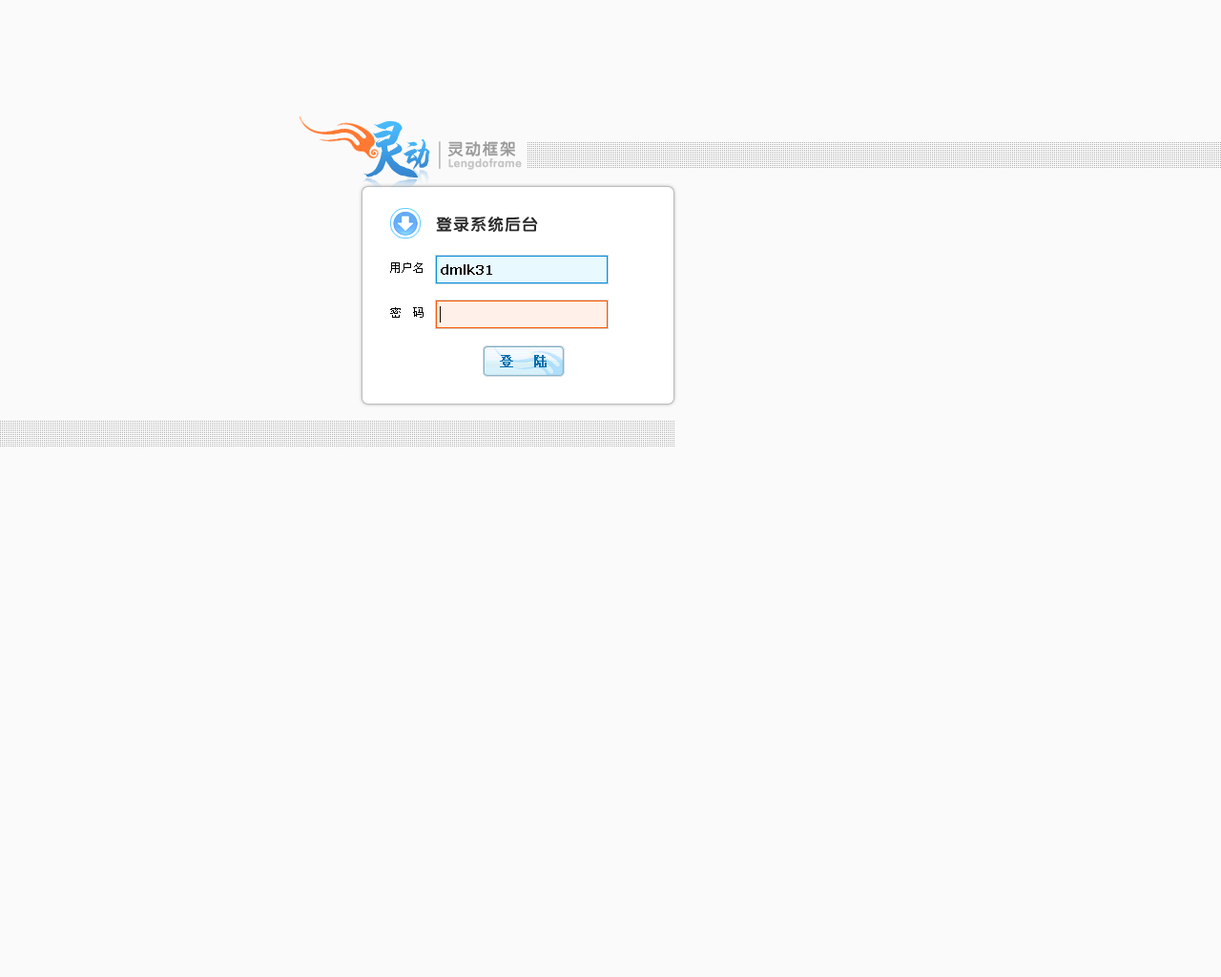
<style>
.page{position:relative;width:1221px;height:977px;background:#fafafa}
.page>*{position:absolute;margin:0}
.t1{font:34.3px "HYi4gj";letter-spacing:0.06em;color:#409fe5}
.t2{font:16.2px "FZY4JW--GB1-0";letter-spacing:0.075em;color:#9c9c9c}
.t3{font:11.4px "FZY4JW--GB1-0";letter-spacing:0.06em;color:#c3c3c3}
.t4{font:16.2px "FZY4JW--GB1-0";letter-spacing:0.06em;color:#2d2d2d}
.t5{font:13.4px "SimSun";letter-spacing:0.1em;color:#006fad;font-weight:bold}
</style>
<div class="page">
<p class="t1" style="left:403px;top:139px;width:27px;height:31px">动</p>
<p class="t2" style="left:448px;top:141px;width:67px;height:15px">灵动框架</p>
<p class="t3" style="left:448px;top:158px;width:74px;height:12px">Lengdoframe</p>
<p class="t4" style="left:436px;top:217px;width:102px;height:15px">登录系统后台</p>
<p class="t5" style="left:500px;top:355px;width:47px;height:12px">登  陆</p>
</div>
